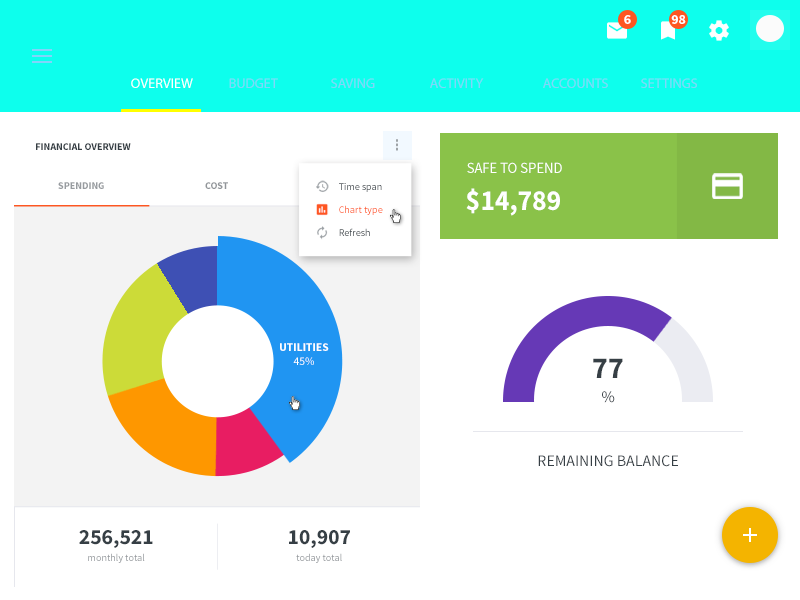
<style>
.page{position:relative;width:800px;height:600px;background:#ffffff}
.page>*{position:absolute;margin:0}
.t1{font:14px "SourceSansPro-Bold";color:#ffffff}
.t2{font:14px "MyriadPro-Regular";color:#ffffff;text-transform:uppercase}
.t3{font:14px "MyriadPro-Regular";color:#81d4fa;text-transform:uppercase}
.t4{font:10.1px "SourceSansPro-Bold";color:#363f45;text-transform:uppercase}
.t5{font:15.4px "SourceSansPro-Regular";color:#ffffff;text-transform:uppercase;scale:0.95 1}
.t6{font:10.1px "SourceSansPro-Bold";color:#979b9f;text-transform:uppercase}
.t7{font:10.1px "SourceSansPro-Bold";color:#919599;text-transform:uppercase}
.t8{font:10.1px/23.1px "SourceSansPro-Regular"}
.t9{font:28.9px "SourceSansPro-Bold";color:#ffffff;text-transform:uppercase;scale:0.95 1}
.t10{font:11.5px "SourceSansPro-Bold";color:#ffffff;text-transform:uppercase}
.t11{font:11.5px "SourceSansPro-Regular";color:#ffffff;text-transform:uppercase}
.t12{font:30px/24px "SourceSansPro-Bold";color:#363f45;text-transform:uppercase}
.t13{font:16px/24px "SourceSansPro-Regular";color:#363f45}
.t14{font:16px "SourceSansPro-Regular";color:#363f45;text-transform:uppercase}
.t15{font:10.1px/17.3px "SourceSansPro-Regular";color:#919599}
.t16{font:21.6px/17.3px "SourceSansPro-Bold";color:#363f45;text-transform:uppercase}
</style>
<div class="page">
<p class="t1" style="left:624px;top:15px;width:7px;height:9px">6</p>
<p class="t1" style="left:671px;top:15px;width:15px;height:9px">98</p>
<p class="t2" style="left:131px;top:78px;width:62px;height:10px">OVERVIEW</p>
<p class="t3" style="left:229px;top:78px;width:49px;height:10px">budget</p>
<p class="t3" style="left:331px;top:78px;width:44px;height:10px">Saving</p>
<p class="t3" style="left:430px;top:78px;width:54px;height:10px">Activity</p>
<p class="t3" style="left:543px;top:78px;width:65px;height:10px">Accounts</p>
<p class="t3" style="left:641px;top:78px;width:56px;height:10px">Settings</p>
<p class="t4" style="left:36px;top:143px;width:95px;height:7px">Financial overview</p>
<p class="t5" style="left:467px;top:162px;width:95px;height:11px">Safe to spend</p>
<p class="t6" style="left:58px;top:182px;width:46px;height:7px">Spending</p>
<p class="t7" style="left:205px;top:182px;width:23px;height:7px">Cost</p>
<p class="t8" style="left:339px;top:183px;width:44px;height:53px">Time span<br>Chart type<br>Refresh</p>
<p class="t9" style="left:466px;top:188px;width:94px;height:28px">$14,789</p>
<p class="t10" style="left:280px;top:343px;width:49px;height:22px;text-align:center">Utilities<br><span class="t11">45%</span></p>
<p class="t12" style="left:593px;top:358px;width:30px;height:45px;text-align:center">77<br><span class="t13">%</span></p>
<p class="t14" style="left:538px;top:455px;width:140px;height:12px">REMAINING BALANCE</p>
<p class="t15" style="left:79px;top:530px;width:74px;height:33px;text-align:center"><span class="t16">256,521<br></span>monthly total</p>
<p class="t15" style="left:289px;top:530px;width:61px;height:33px;text-align:center"><span class="t16">10,907<br></span>today total</p>
</div>
